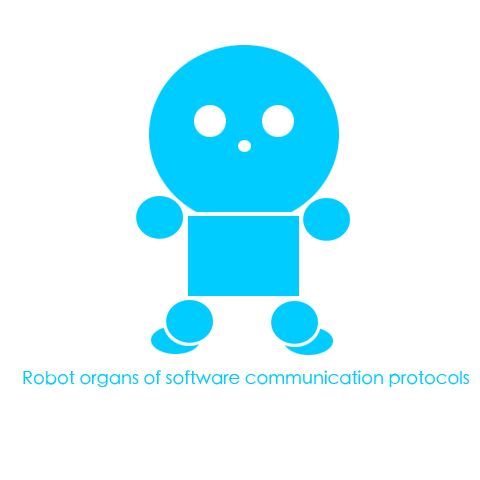
<style>
.page{position:relative;width:480px;height:480px;background:#ffffff}
.page>*{position:absolute;margin:0}
.t1{font:18px "STHeitiTC-Light";color:#00ccff}
</style>
<div class="page">
<p class="t1" style="left:23px;top:370px;width:447px;height:17px">Robot organs of software communication protocols</p>
</div>
